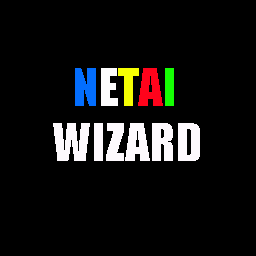
<style>
.page{position:relative;width:256px;height:256px;background:#000000}
.page>*{position:absolute;margin:0}
.t1{font:48px "Impact";color:#036eff}
.t2{font:48px "Impact";color:#fdfcfd}
.t3{font:48px "Impact";color:#f6ff03}
.t4{font:48px "Impact";color:#ff031b}
.t5{font:48px "Impact";color:#15ff03}
.t6{font:48px "Impact";color:#fdf9fd}
</style>
<div class="page">
<p class="t1" style="left:75px;top:68px;width:99px;height:38px">N<span class="t2">E</span><span class="t3">T</span><span class="t4">A</span><span class="t5">I</span></p>
<p class="t6" style="left:53px;top:123px;width:147px;height:38px">WIZARD</p>
</div>
